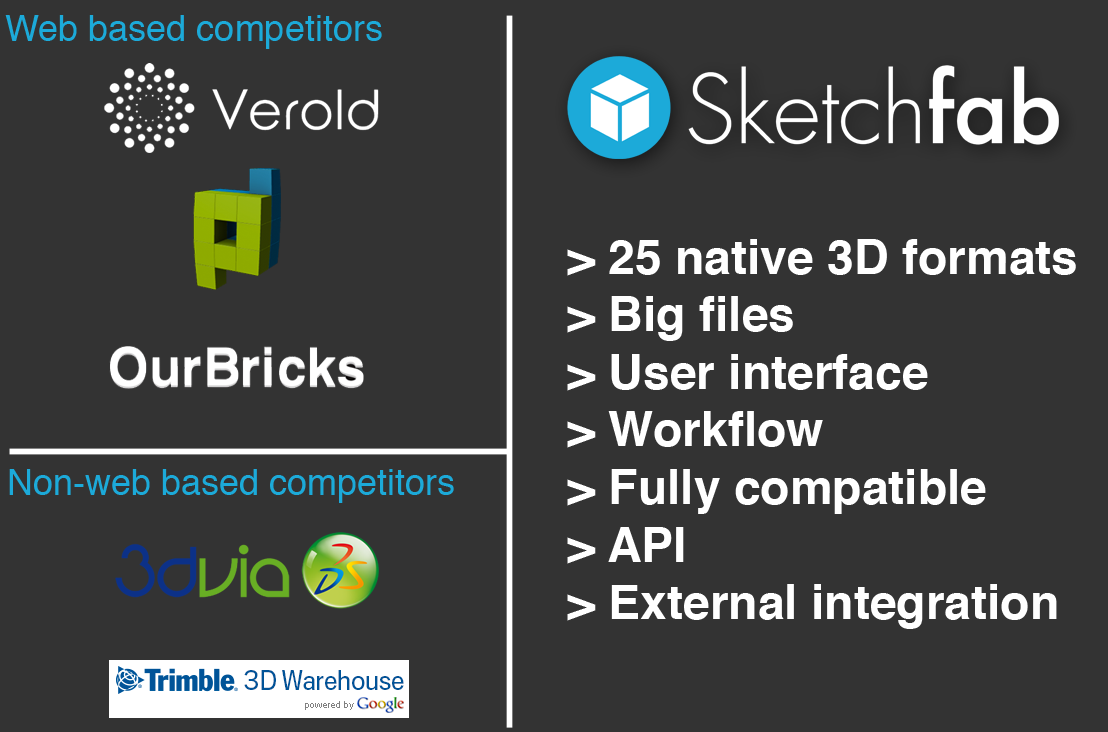
<style>
.page{position:relative;width:1108px;height:732px;background:#333333}
.page>*{position:absolute;margin:0}
.t1{font:36px "Helvetica";color:#1caad9}
.t2{font:48px "Helvetica-Bold";color:#ffffff}
</style>
<div class="page">
<p class="t1" style="left:5px;top:15px;width:377px;height:34px">Web based competitors</p>
<p class="t2" style="left:567px;top:239px;width:509px;height:390px">&gt; 25 native 3D formats<br>&gt; Big files<br>&gt; User interface<br>&gt; Workflow<br>&gt; Fully compatible<br>&gt; API<br>&gt; External integration</p>
<p class="t1" style="left:9px;top:469px;width:445px;height:34px">Non-web based competitors</p>
</div>
